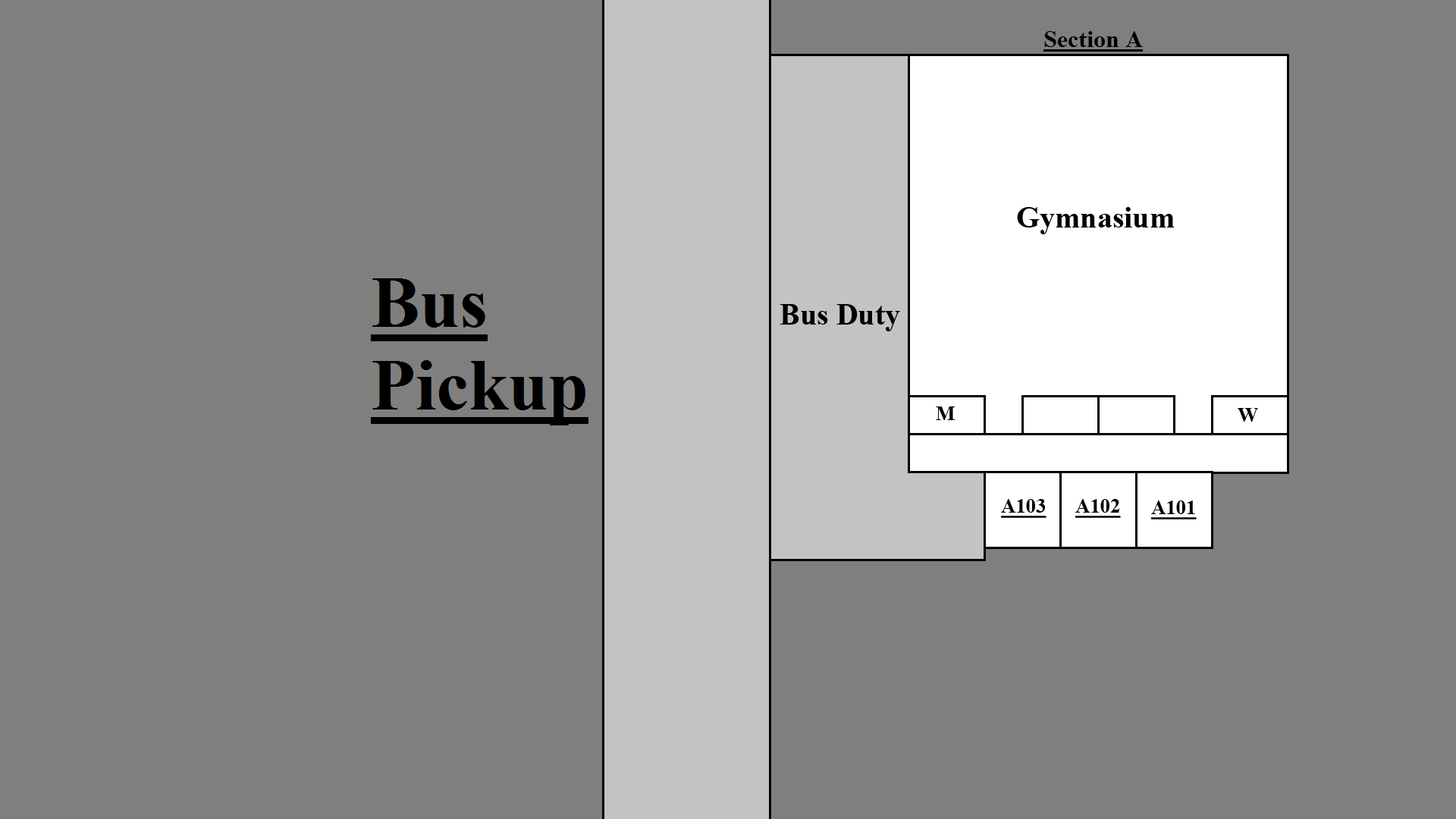
<style>
.page{position:relative;width:1456px;height:819px;background:#7f7f7f}
.page>*{position:absolute;margin:0}
.t1{font:30.3px "TimesNewRomanPS-BoldMT";color:#000000}
.t2{font:20.2px "TimesNewRomanPS-BoldMT";color:#000000}
.t3{font:20.2px "TimesNewRomanPS-BoldMT";color:#000000;text-decoration:underline}
</style>
<div class="page">
<p class="t1" style="left:1017px;top:207px;width:158px;height:27px">Gymnasium</p>
<p class="t1" style="left:780px;top:304px;width:120px;height:27px">Bus Duty</p>
<p class="t2" style="left:936px;top:406px;width:19px;height:14px">M</p>
<p class="t2" style="left:1238px;top:408px;width:20px;height:14px">W</p>
<p class="t3" style="left:1001px;top:499px;width:45px;height:19px">A103</p>
<p class="t3" style="left:1075px;top:499px;width:46px;height:19px">A102</p>
<p class="t3" style="left:1151px;top:500px;width:46px;height:19px">A101</p>
</div>
